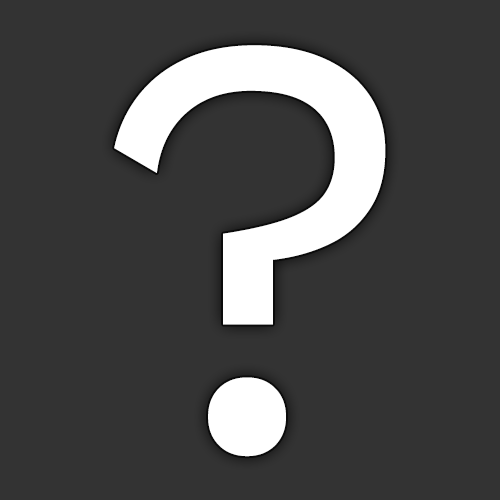
<style>
.page{position:relative;width:500px;height:500px;background:#333333}
.page>*{position:absolute;margin:0}
.t1{font:603.9px "WorkSans-Regular";color:#ffffff}
</style>
<div class="page">
<p class="t1" style="left:114px;top:45px;width:272px;height:412px">?</p>
</div>
